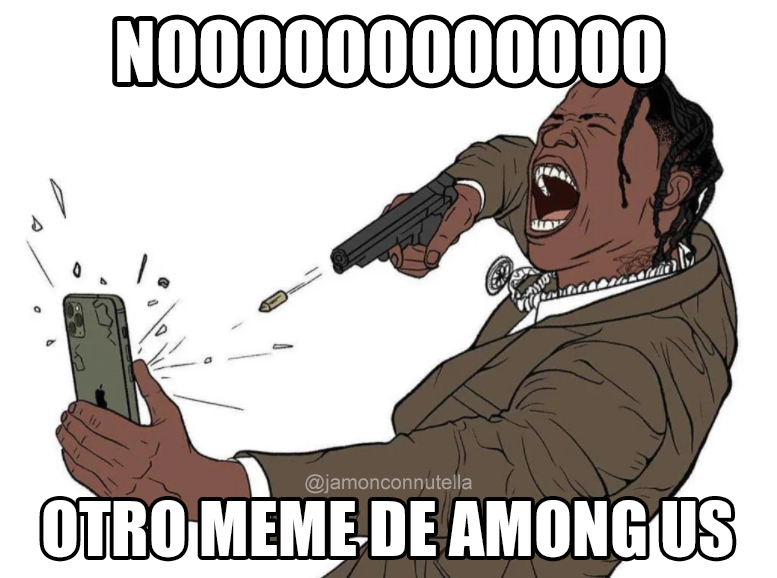
<style>
.page{position:relative;width:777px;height:578px;background:#ffffff}
.page>*{position:absolute;margin:0}
.t1{font:77.3px "Impact";color:#ffffff}
.t2{font:20.2px "ArialMT";color:#a9a19b}
.t3{font:69.6px "Impact";color:#ffffff}
</style>
<div class="page">
<p class="t1" style="left:117px;top:19px;width:544px;height:65px">NOOOOOOOOOOOO</p>
<p class="t2" style="left:305px;top:474px;width:167px;height:20px">@jamonconnutella</p>
<p class="t3" style="left:43px;top:500px;width:690px;height:58px">OTRO MEME DE AMONG US</p>
</div>
